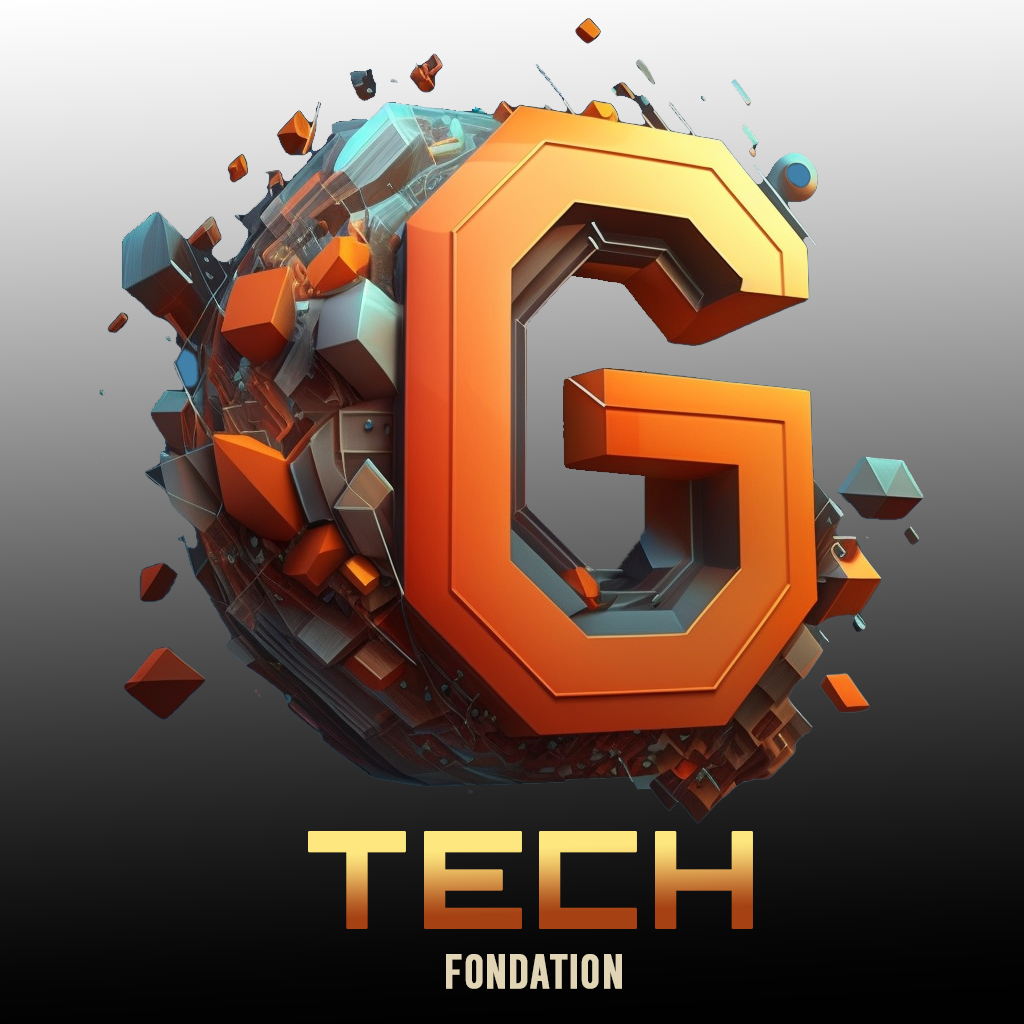
<style>
.page{position:relative;width:1024px;height:1024px}
.page>*{position:absolute;margin:0}
.t1{font:153.5px "Hooge0553";font-weight:bold}
.t2{font:48px "Bebas-Regular";color:#e1d5b6;font-weight:bold}
</style>
<div class="page">
<p class="t1" style="left:308px;top:831px;width:445px;height:98px">TECH</p>
<p class="t2" style="left:446px;top:954px;width:176px;height:35px">FONDATION</p>
</div>
